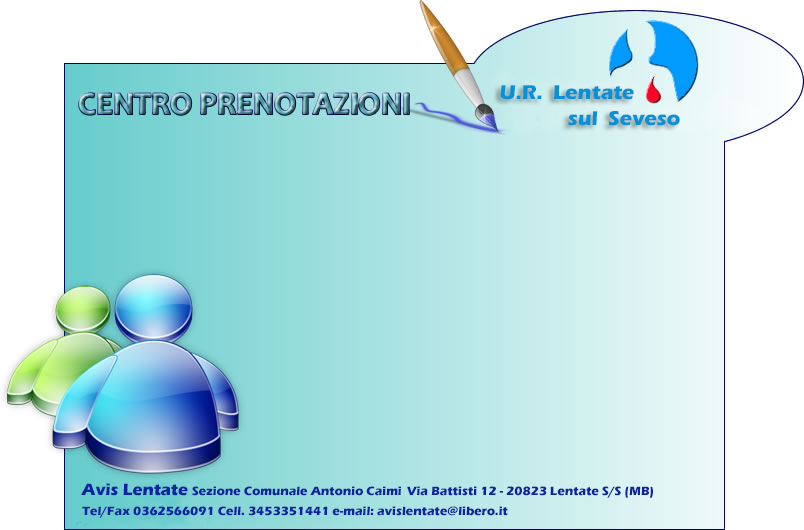
<style>
.page{position:relative;width:804px;height:530px;background:#ffffff}
.page>*{position:absolute;margin:0}
.t1{font:20.8px "ErasITC-Bold";color:#0891d7}
.t2{font:12.5px "ErasITC-Bold";color:#0e239f}
.t3{font:16.7px "ErasITC-Bold";color:#0e239f}
</style>
<div class="page">
<p class="t1" style="left:500px;top:85px;width:134px;height:15px">U.R.  Lentate</p>
<p class="t1" style="left:568px;top:111px;width:112px;height:15px">sul  Seveso</p>
<p class="t2" style="left:81px;top:483px;width:572px;height:15px"><span class="t3">Avis Lentate </span>Sezione Comunale Antonio Caimi Via Battisti 12 - 20823 Lentate S/S (MB)</p>
<p class="t2" style="left:82px;top:506px;width:426px;height:12px">Tel/Fax 0362566091 Cell. 3453351441 e-mail: avislentate@libero.it</p>
</div>
